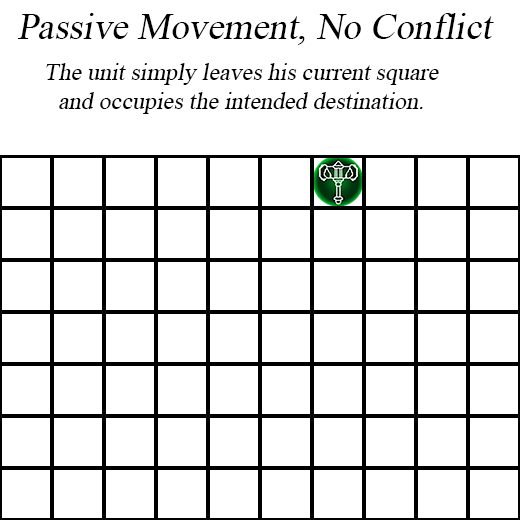
<style>
.page{position:relative;width:520px;height:520px;background:#ffffff}
.page>*{position:absolute;margin:0}
.t1{font:37px "TimesNewRomanPSMT";color:#000000;font-style:italic}
.t2{font:24px "TimesNewRomanPSMT";color:#000000;font-style:italic}
</style>
<div class="page">
<p class="t1" style="left:17px;top:13px;width:477px;height:32px">Passive Movement, No Conflict</p>
<p class="t2" style="left:46px;top:63px;width:393px;height:51px;text-align:center">The unit simply leaves his current square<br>and occupies the intended destination.</p>
</div>
